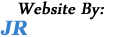
<style>
.page{position:relative;width:126px;height:37px;background:#ffffff}
.page>*{position:absolute;margin:0}
.t1{font:23.5px "ArabicTypesetting";color:#000000;font-weight:bold;font-style:italic}
.t2{font:25.3px "ShonarBangla-Bold";color:#ffffff;font-weight:bold;font-style:italic}
.t3{font:25.3px "ShonarBangla-Bold";color:#3681ce;font-weight:bold;font-style:italic}
</style>
<div class="page">
<p class="t1" style="left:18px;top:1px;width:86px;height:19px">Website By:</p>
<p class="t2" style="left:0px;top:20px;width:124px;height:16px"><span class="t3">JR</span>WEBPRO</p>
</div>
